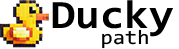
<style>
.page{position:relative;width:179px;height:49px;background:#ffffff}
.page>*{position:absolute;margin:0}
.t1{font:40.3px "Consolas-Bold";color:#000000;scale:1.11 1}
.t2{font:20.1px "Consolas";color:#000000;scale:1.11 1}
</style>
<div class="page">
<p class="t1" style="left:52px;top:0px;width:121px;height:37px">Ducky</p>
<p class="t2" style="left:102px;top:29px;width:46px;height:20px">path</p>
</div>
